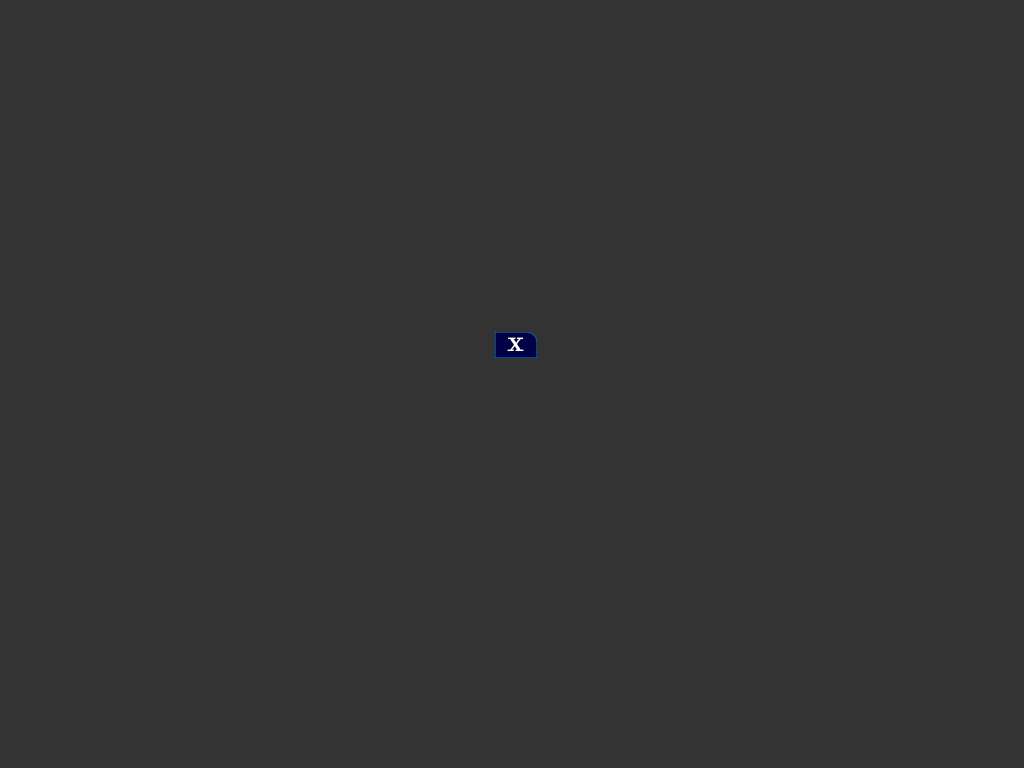
<style>
.page{position:relative;width:1024px;height:768px;background:#333333}
.page>*{position:absolute;margin:0}
.t1{font:32px "JavaneseText";color:#ffffff}
</style>
<div class="page">
<p class="t1" style="left:507px;top:337px;width:17px;height:14px">x</p>
</div>
